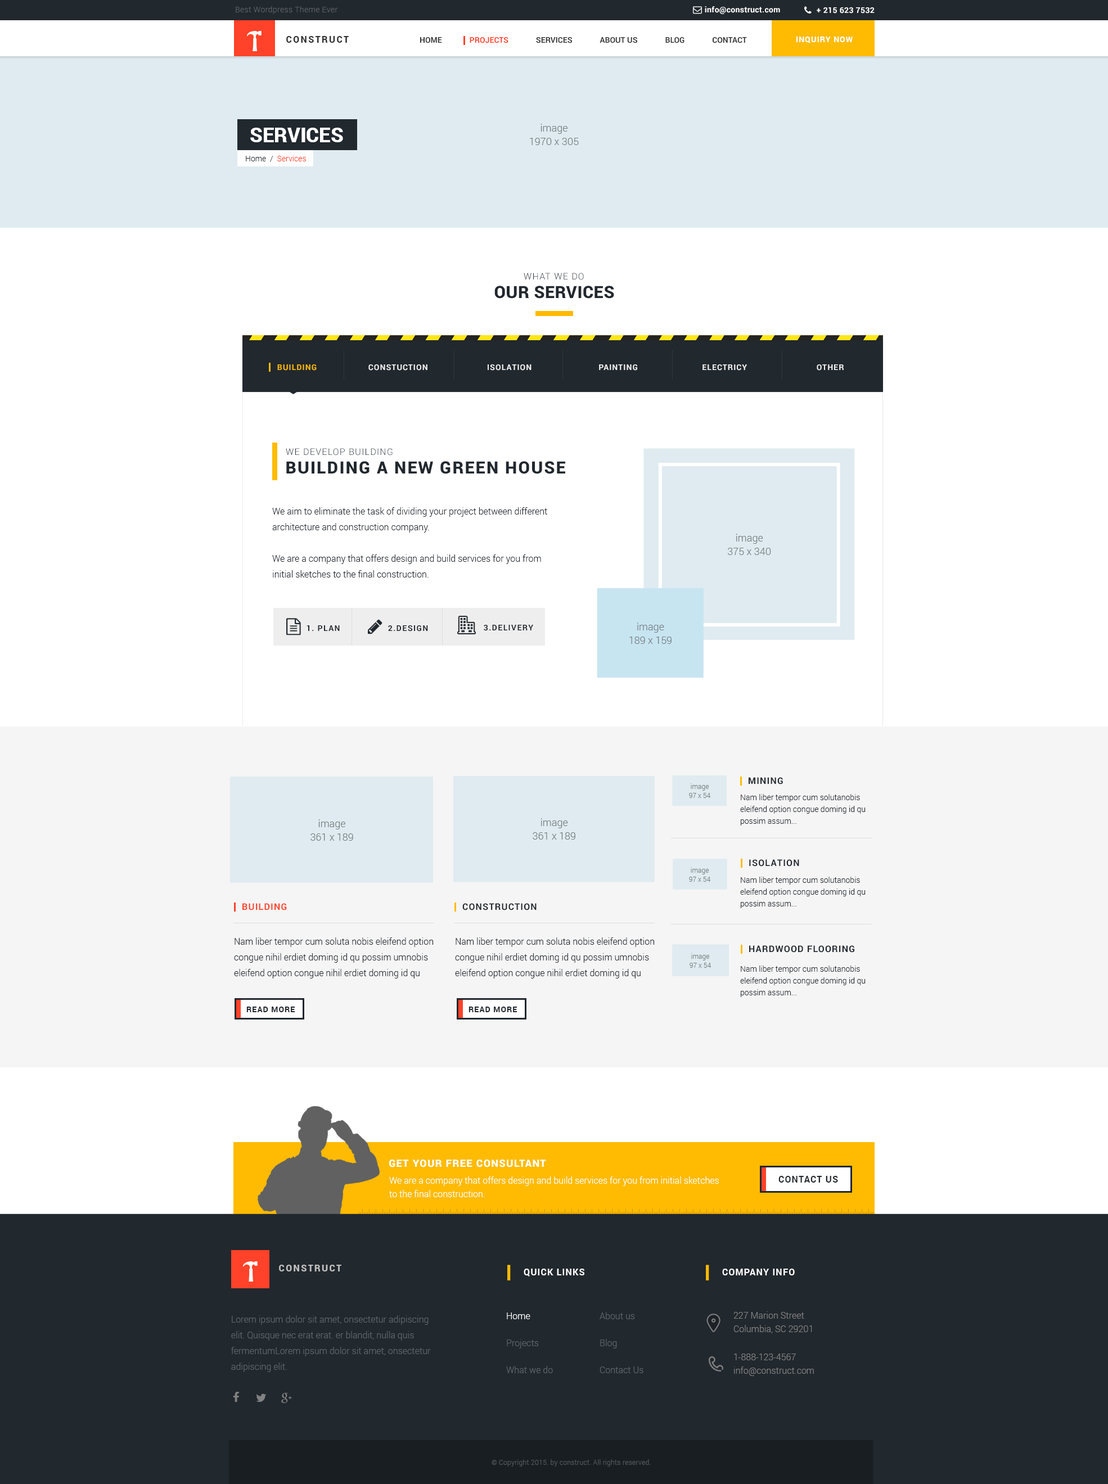
<style>
.page{position:relative;width:1108px;height:1484px;background:#ffffff}
.page>*{position:absolute;margin:0}
.t1{font:7.9px "Roboto-Light";letter-spacing:0.025em;color:#5a5f63}
.t2{font:7.9px "Roboto-Bold";letter-spacing:0.025em;color:#ffffff}
.t3{font:9px "Roboto-Black";letter-spacing:0.15em;color:#353537;text-transform:uppercase}
.t4{font:7.9px "Roboto-Bold";color:#353537}
.t5{font:7.9px "Roboto-Bold";color:#ff4229}
.t6{font:7.9px "Roboto-Bold";letter-spacing:0.075em;color:#ffffff;text-transform:uppercase}
.t7{font:10.1px/13.5px "Roboto-Light";color:#767d81}
.t8{font:20.2px "Roboto-Black";color:#ffffff;text-transform:uppercase}
.t9{font:7.9px "Roboto-Light";color:#ff4229}
.t10{font:7.9px "Roboto-Light";color:#21282e}
.t11{font:9px "Roboto-Light";letter-spacing:0.075em;color:#21282e;text-transform:uppercase}
.t12{font:16.9px "Roboto-Black";letter-spacing:0.02em;color:#21282e;text-transform:uppercase}
.t13{font:7.9px "Roboto-Bold";letter-spacing:0.075em;color:#f3f3f3;text-transform:uppercase}
.t14{font:7.9px "Roboto-Bold";letter-spacing:0.075em;color:#ffbb02;text-transform:uppercase}
.t15{font:16.9px "Roboto-Black";letter-spacing:0.075em;color:#21282e;text-transform:uppercase}
.t16{font:9px/15.8px "Roboto-Light";color:#21282e}
.t17{font:7.9px "Roboto-Bold";letter-spacing:0.1em;color:#21282e;text-transform:uppercase}
.t18{font:7.9px "Roboto-Bold";letter-spacing:0.1em;color:#21282e}
.t19{font:6.8px/9px "Roboto-Light";color:#767d81}
.t20{font:9px "Roboto-Bold";letter-spacing:0.075em;color:#21282e;text-transform:uppercase}
.t21{font:7.9px/11.8px "Roboto-Light";color:#21282e}
.t22{font:9px "Roboto-Bold";letter-spacing:0.075em;color:#ff4229;text-transform:uppercase}
.t23{font:7.9px "Roboto-Bold";letter-spacing:0.075em;color:#21282e;text-transform:uppercase}
.t24{font:10.1px "Roboto-Black";letter-spacing:0.075em;color:#ffffff;text-transform:uppercase}
.t25{font:9px/13.5px "Roboto-Light";color:#ffffff}
.t26{font:9px "Roboto-Black";letter-spacing:0.15em;color:#c0bfbe;text-transform:uppercase}
.t27{font:9px "Roboto-Bold";letter-spacing:0.075em;color:#ffffff;text-transform:uppercase}
.t28{font:9px/27px "Roboto-Light";color:#5e656a}
.t29{font:9px/27px "Roboto-Light";color:#ffffff}
.t30{font:9px/13.5px "Roboto-Light";color:#828282}
.t31{font:9px/15.8px "Roboto-Light";color:#5e656a}
.t32{font:6.8px "Roboto-Light";letter-spacing:0.025em;color:#52595e}
</style>
<div class="page">
<p class="t1" style="left:236px;top:6px;width:102px;height:8px">Best Wordpress Theme Ever</p>
<p class="t2" style="left:705px;top:6px;width:75px;height:8px">info@construct.com</p>
<p class="t2" style="left:817px;top:7px;width:58px;height:7px">+ 215 623 7532</p>
<p class="t3" style="left:286px;top:36px;width:63px;height:7px">Construct</p>
<p class="t4" style="left:420px;top:37px;width:327px;height:6px">HOME              <span class="t5">PROJECTS</span>              SERVICES              ABOUT US              BLOG              CONTACT</p>
<p class="t6" style="left:796px;top:37px;width:57px;height:6px">Inquiry Now</p>
<p class="t7" style="left:530px;top:124px;width:49px;height:21px;text-align:center">image<br>1970 x 305</p>
<p class="t8" style="left:250px;top:128px;width:93px;height:14px">Services</p>
<p class="t9" style="left:246px;top:155px;width:60px;height:7px"><span class="t10">Home  /  </span>Services</p>
<p class="t11" style="left:524px;top:273px;width:60px;height:7px">What We Do</p>
<p class="t12" style="left:494px;top:286px;width:120px;height:13px">Our Services</p>
<p class="t13" style="left:277px;top:364px;width:567px;height:7px"><span class="t14">Building</span>                    Constuction                       Isolation                          Painting                         Electricy                           Other</p>
<p class="t11" style="left:286px;top:448px;width:107px;height:8px">we develop Building</p>
<p class="t15" style="left:286px;top:461px;width:279px;height:13px">Building a New Green House</p>
<p class="t16" style="left:272px;top:507px;width:275px;height:71px">We aim to eliminate the task of dividing your project between different architecture and construction company. <br><br>We are a company that offers design and build services for you from initial sketches to the final construction.</p>
<p class="t7" style="left:728px;top:534px;width:43px;height:21px;text-align:center">image<br>375 x 340</p>
<p class="t17" style="left:307px;top:626px;width:33px;height:5px">1. Plan</p>
<p class="t17" style="left:388px;top:626px;width:40px;height:6px">2.DESIGN</p>
<p class="t18" style="left:484px;top:625px;width:49px;height:6px">3.DELIVERY</p>
<p class="t7" style="left:629px;top:623px;width:43px;height:21px;text-align:center">image<br>189 x 159</p>
<p class="t19" style="left:689px;top:784px;width:22px;height:14px;text-align:center">image<br>97 x 54</p>
<p class="t20" style="left:749px;top:777px;width:34px;height:8px">Mining</p>
<p class="t21" style="left:740px;top:794px;width:126px;height:32px">Nam liber tempor cum solutanobis eleifend option congue doming id qu possim assum...</p>
<p class="t7" style="left:310px;top:820px;width:43px;height:21px;text-align:center">image<br>361 x 189</p>
<p class="t7" style="left:533px;top:818px;width:42px;height:22px;text-align:center">image<br>361 x 189</p>
<p class="t19" style="left:689px;top:867px;width:22px;height:15px;text-align:center">image<br>97 x 54</p>
<p class="t20" style="left:749px;top:860px;width:50px;height:7px">Isolation</p>
<p class="t21" style="left:740px;top:877px;width:126px;height:31px">Nam liber tempor cum solutanobis eleifend option congue doming id qu possim assum...</p>
<p class="t22" style="left:242px;top:903px;width:45px;height:8px">Building</p>
<p class="t20" style="left:462px;top:903px;width:75px;height:8px">Construction</p>
<p class="t16" style="left:234px;top:938px;width:200px;height:41px">Nam liber tempor cum soluta nobis eleifend option congue nihil erdiet doming id qu possim umnobis eleifend option congue nihil erdiet doming id qu possim</p>
<p class="t16" style="left:455px;top:938px;width:200px;height:41px">Nam liber tempor cum soluta nobis eleifend option congue nihil erdiet doming id qu possim umnobis eleifend option congue nihil erdiet doming id qu possim</p>
<p class="t19" style="left:690px;top:953px;width:22px;height:15px;text-align:center">image<br>97 x 54</p>
<p class="t20" style="left:749px;top:946px;width:105px;height:7px">Hardwood flooring</p>
<p class="t21" style="left:740px;top:966px;width:126px;height:31px">Nam liber tempor cum solutanobis eleifend option congue doming id qu possim assum...</p>
<p class="t23" style="left:246px;top:1007px;width:49px;height:5px">Read More</p>
<p class="t23" style="left:469px;top:1007px;width:49px;height:5px">Read More</p>
<p class="t24" style="left:389px;top:1160px;width:157px;height:8px">Get Your Free Consultant</p>
<p class="t25" style="left:389px;top:1177px;width:330px;height:21px">We are a company that offers design and build services for you from initial sketches <br>to the final construction.</p>
<p class="t20" style="left:778px;top:1176px;width:60px;height:7px">Contact US</p>
<p class="t26" style="left:279px;top:1265px;width:62px;height:7px">Construct</p>
<p class="t27" style="left:524px;top:1269px;width:60px;height:8px">Quick Links</p>
<p class="t27" style="left:722px;top:1269px;width:73px;height:7px">Company Info</p>
<p class="t28" style="left:506px;top:1313px;width:47px;height:61px"><span class="t29">Home<br></span>Projects<br>What we do</p>
<p class="t28" style="left:600px;top:1312px;width:44px;height:62px">About us<br>Blog<br>Contact Us</p>
<p class="t30" style="left:734px;top:1312px;width:78px;height:22px">227 Marion Street<br>Columbia, SC 29201</p>
<p class="t31" style="left:231px;top:1316px;width:200px;height:56px">Lorem ipsum dolor sit amet, onsectetur adipiscing elit. Quisque nec erat erat. er blandit, nulla quis fermentumLorem ipsum dolor sit amet, onsectetur adipiscing elit.</p>
<p class="t30" style="left:734px;top:1354px;width:80px;height:22px">1-888-123-4567<br>info@construct.com</p>
<p class="t32" style="left:492px;top:1460px;width:159px;height:7px">© Copyright 2015. by construct. All rights reserved.</p>
</div>
